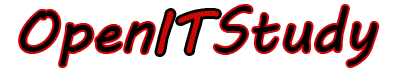
<style>
.page{position:relative;width:400px;height:70px;background:#ffffff}
.page>*{position:absolute;margin:0}
.t1{font:60px "MVBoli";color:#000000}
.t2{font:60px "MVBoli";color:#d00707}
</style>
<div class="page">
<p class="t1" style="left:215px;top:6px;width:163px;height:60px">Study</p>
<p class="t1" style="left:20px;top:11px;width:134px;height:55px">Open</p>
<p class="t2" style="left:157px;top:11px;width:62px;height:43px">IT</p>
</div>
